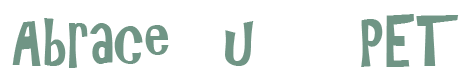
<style>
.page{position:relative;width:472px;height:83px;background:#ffffff}
.page>*{position:absolute;margin:0}
.t1{font:64.1px "ARCHRISTY";color:#709585;scale:0.93 1}
</style>
<div class="page">
<p class="t1" style="left:12px;top:14px;width:447px;height:54px">Abrace   u      PET</p>
</div>
